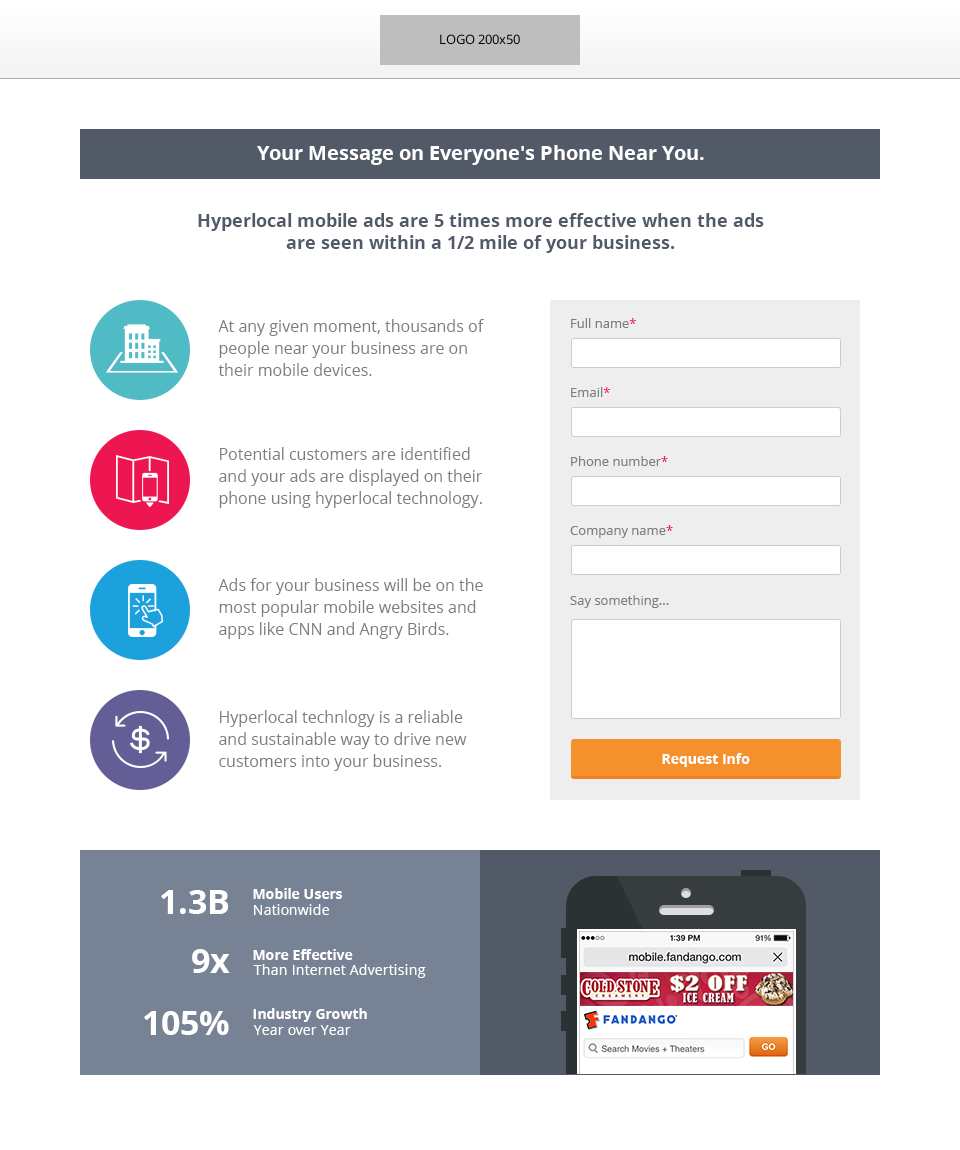
<style>
.page{position:relative;width:960px;height:1150px;background:#ffffff}
.page>*{position:absolute;margin:0}
.t1{font:13px "OpenSans";color:#000000}
.t2{font:20px "OpenSans-Bold";color:#ffffff}
.t3{font:18px "OpenSans-Bold";color:#515a67}
.t4{font:13px "OpenSans";color:#7d7d7d}
.t5{font:13px "OpenSans";color:#ed1651}
.t6{font:16px/22px "OpenSans";color:#7d7d7d}
.t7{font:14px "OpenSans-Bold";color:#ffffff}
.t8{font:34px "OpenSans-Bold";color:#ffffff}
.t9{font:14px "OpenSans";color:#ffffff}
</style>
<div class="page">
<p class="t1" style="left:440px;top:34px;width:80px;height:11px">LOGO 200x50</p>
<p class="t2" style="left:257px;top:145px;width:447px;height:20px">Your Message on Everyone's Phone Near You.</p>
<p class="t3" style="left:198px;top:213px;width:566px;height:40px;text-align:center">Hyperlocal mobile ads are 5 times more effective when the ads<br>are seen within a 1/2 mile of your business.</p>
<p class="t4" style="left:571px;top:318px;width:65px;height:10px">Full name<span class="t5">*</span></p>
<p class="t6" style="left:218px;top:319px;width:266px;height:57px">At any given moment, thousands of people near your business are on their mobile devices.</p>
<p class="t4" style="left:571px;top:387px;width:39px;height:10px">Email<span class="t5">*</span></p>
<p class="t6" style="left:219px;top:447px;width:263px;height:61px">Potential customers are identified and your ads are displayed on their phone using hyperlocal technology.</p>
<p class="t4" style="left:571px;top:456px;width:97px;height:10px">Phone number<span class="t5">*</span></p>
<p class="t4" style="left:570px;top:525px;width:103px;height:13px">Company name<span class="t5">*</span></p>
<p class="t6" style="left:218px;top:578px;width:265px;height:61px">Ads for your business will be on the most popular mobile websites and apps like CNN and Angry Birds.</p>
<p class="t4" style="left:570px;top:595px;width:99px;height:13px">Say something...</p>
<p class="t6" style="left:219px;top:710px;width:248px;height:61px">Hyperlocal technlogy is a reliable and sustainable way to drive new customers into your business.</p>
<p class="t7" style="left:662px;top:753px;width:88px;height:14px">Request Info</p>
<p class="t8" style="left:161px;top:890px;width:67px;height:24px">1.3B</p>
<p class="t7" style="left:253px;top:888px;width:89px;height:11px">Mobile Users</p>
<p class="t9" style="left:254px;top:904px;width:75px;height:11px">Nationwide</p>
<p class="t8" style="left:192px;top:949px;width:38px;height:24px">9x</p>
<p class="t7" style="left:253px;top:949px;width:100px;height:11px">More Effective</p>
<p class="t9" style="left:253px;top:964px;width:173px;height:14px">Than Internet Advertising</p>
<p class="t8" style="left:144px;top:1011px;width:85px;height:24px">105%</p>
<p class="t7" style="left:253px;top:1008px;width:114px;height:14px">Industry Growth</p>
<p class="t9" style="left:253px;top:1025px;width:98px;height:10px">Year over Year</p>
</div>
